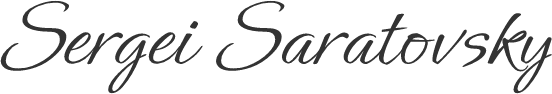
<style>
.page{position:relative;width:552px;height:94px;background:#ffffff}
.page>*{position:absolute;margin:0}
.t1{font:98px "Ephesis-Regular";color:#333333}
</style>
<div class="page">
<p class="t1" style="left:0px;top:0px;width:552px;height:94px">Sergei Saratovsky</p>
</div>
